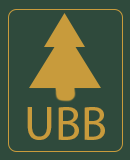
<style>
.page{position:relative;width:130px;height:160px;background:#2f4a3c}
.page>*{position:absolute;margin:0}
.t1{font:48px "MyriadPro-Regular";color:#c89b3c}
</style>
<div class="page">
<p class="t1" style="left:27px;top:107px;width:78px;height:33px">UBBB</p>
</div>
